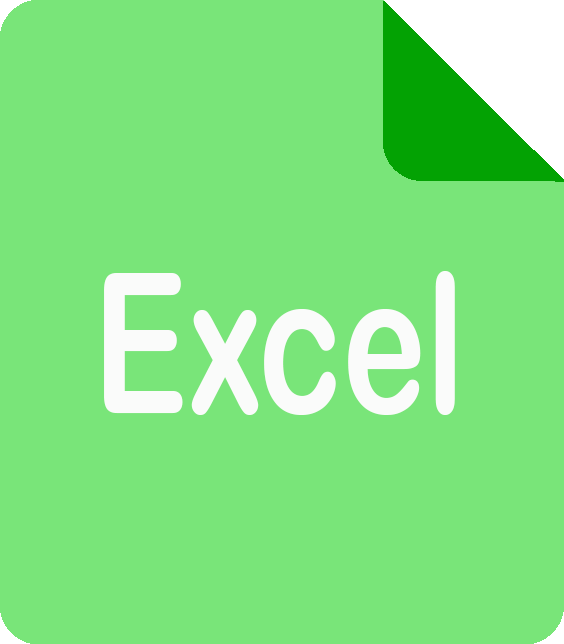
<style>
.page{position:relative;width:564px;height:644px;background:#79e579}
.page>*{position:absolute;margin:0}
.t1{font:195.5px "ArialRoundedMTBold";color:#fafbfa;scale:0.72 1}
</style>
<div class="page">
<p class="t1" style="left:104px;top:271px;width:351px;height:144px">Excel</p>
</div>
